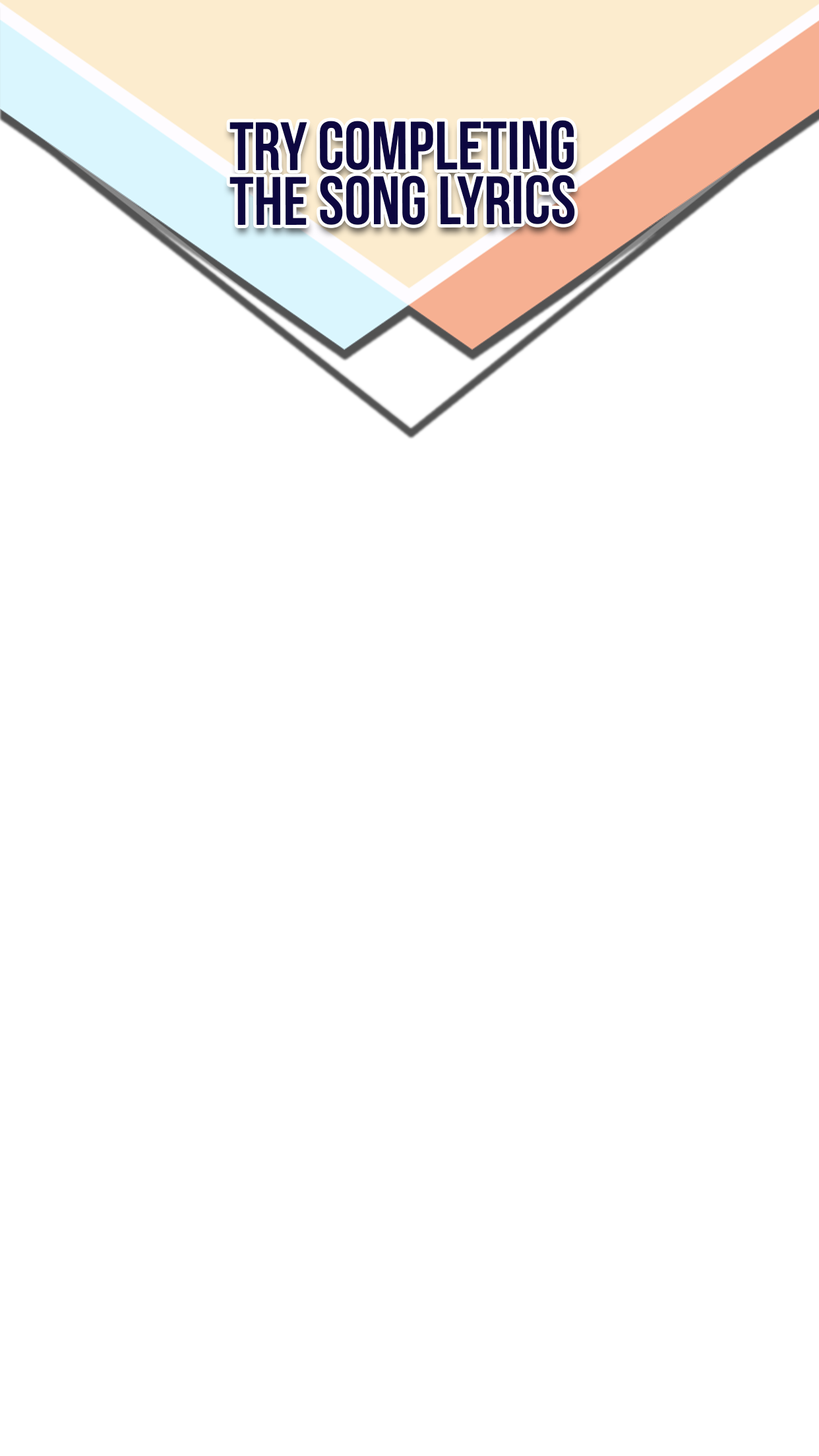
<style>
.page{position:relative;width:819px;height:1456px;background:#ffffff}
.page>*{position:absolute;margin:0}
.t1{font:68.4px/54.7px "BebasNeueBold";color:#0d0740;text-transform:uppercase}
</style>
<div class="page">
<p class="t1" style="left:229px;top:120px;width:346px;height:105px;text-align:center">Try completing<br>the song lyrics</p>
</div>
